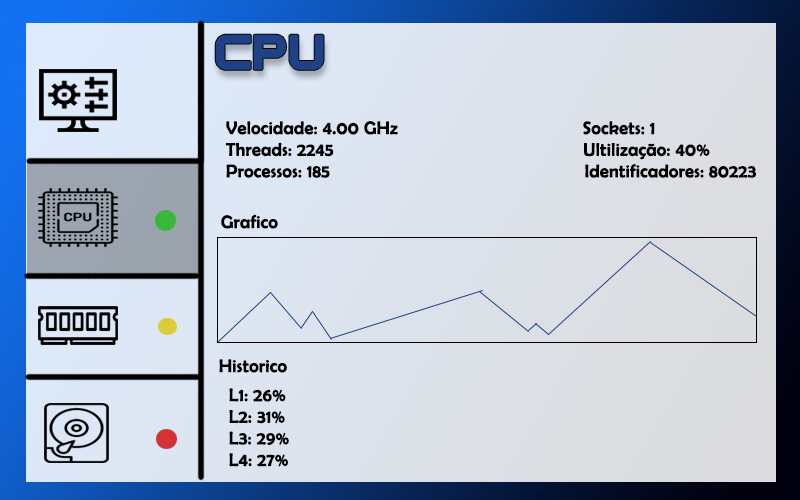
<style>
.page{position:relative;width:800px;height:500px}
.page>*{position:absolute;margin:0}
.t1{font:48px "SovietProgram-Regular";color:#1f4287;font-weight:bold}
.t2{font:18px "BerlinSansFB-Reg";color:#000000;font-weight:bold}
</style>
<div class="page">
<p class="t1" style="left:215px;top:34px;width:109px;height:36px">CPU</p>
<p class="t2" style="left:225px;top:121px;width:531px;height:57px">Velocidade: 4.00 GHz                                     Sockets: 1<br>Threads: 2245                                                  Ultilização: 40%<br>Processos: 185                                                   Identificadores: 80223</p>
<p class="t2" style="left:221px;top:214px;width:57px;height:15px">Grafico</p>
<p class="t2" style="left:219px;top:359px;width:68px;height:14px">Historico</p>
<p class="t2" style="left:229px;top:388px;width:60px;height:79px">L1: 26%<br>L2: 31%<br>L3: 29%<br>L4: 27%</p>
</div>
